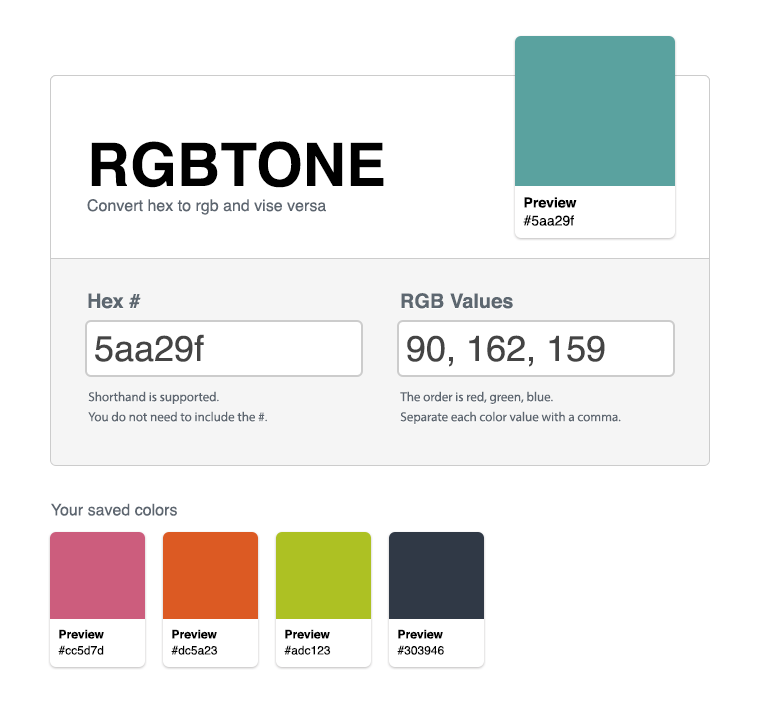
<style>
.page{position:relative;width:760px;height:717px;background:#ffffff}
.page>*{position:absolute;margin:0}
.t1{font:16px/25px "Helvetica";color:#5d6670}
.t2{font:60px/25px "Helvetica-Bold";color:#000000}
.t3{font:14px/18px "Helvetica-Bold";color:#000000}
.t4{font:14px/18px "Helvetica";color:#000000}
.t5{font:20px "Helvetica-Bold";color:#5d6770}
.t6{font:36px "Helvetica";color:#444444}
.t7{font:13px/20px "MyriadPro-Regular";color:#5d6670}
.t8{font:16px "Helvetica";color:#5d6670}
.t9{font:12px/16px "Helvetica-Bold";color:#000000}
.t10{font:12px/16px "Helvetica";color:#000000}
</style>
<div class="page">
<p class="t1" style="left:87px;top:141px;width:297px;height:74px"><span class="t2">RGBTONE<br></span>Convert hex to rgb and vise versa</p>
<p class="t3" style="left:523px;top:197px;width:54px;height:29px">Preview<br><span class="t4">#5aa29f</span></p>
<p class="t5" style="left:88px;top:293px;width:53px;height:16px">Hex #</p>
<p class="t5" style="left:401px;top:293px;width:112px;height:16px">RGB Values</p>
<p class="t6" style="left:95px;top:334px;width:109px;height:28px">5aa29f</p>
<p class="t6" style="left:407px;top:335px;width:198px;height:32px">90, 162, 159</p>
<p class="t7" style="left:88px;top:391px;width:179px;height:31px">Shorthand is supported.<br>You do not need to include the #.</p>
<p class="t7" style="left:400px;top:391px;width:221px;height:33px">The order is red, green, blue.<br>Separate each color value with a comma.</p>
<p class="t8" style="left:51px;top:503px;width:126px;height:13px">Your saved colors</p>
<p class="t9" style="left:58px;top:629px;width:46px;height:26px">Preview<br><span class="t10">#cc5d7d</span></p>
<p class="t9" style="left:171px;top:629px;width:47px;height:26px">Preview<br><span class="t10">#dc5a23</span></p>
<p class="t9" style="left:284px;top:629px;width:47px;height:26px">Preview<br><span class="t10">#adc123</span></p>
<p class="t9" style="left:397px;top:629px;width:47px;height:26px">Preview<br><span class="t10">#303946</span></p>
</div>
